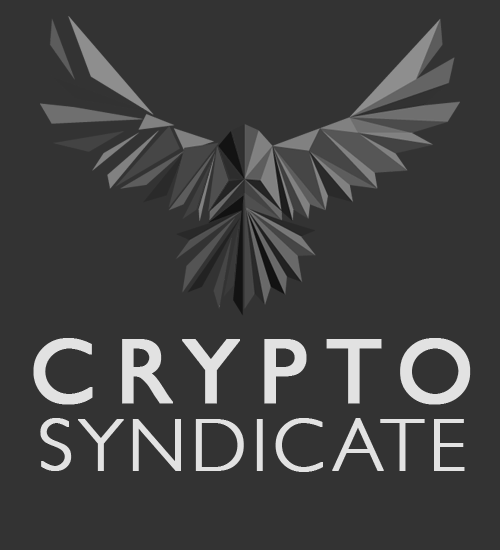
<style>
.page{position:relative;width:500px;height:550px;background:#333333}
.page>*{position:absolute;margin:0}
.t1{font:91.7px "GillSans";letter-spacing:0.2em;color:#e2e2e2;font-weight:bold}
.t2{font:75px "GillSans-Light";letter-spacing:0.045em;color:#e2e2e2;font-weight:bold}
</style>
<div class="page">
<p class="t1" style="left:33px;top:338px;width:438px;height:67px">CRYPTO</p>
<p class="t2" style="left:40px;top:418px;width:425px;height:54px">SYNDICATE</p>
</div>
